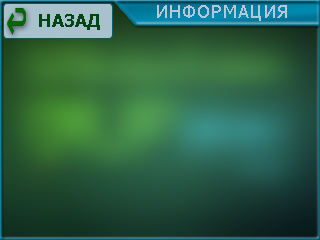
<style>
.page{position:relative;width:320px;height:240px}
.page>*{position:absolute;margin:0}
.t1{font:18px "Tahoma";letter-spacing:0.075em;color:#bac5d5}
.t2{font:18px "Tahoma-Bold";color:#004612}
</style>
<div class="page">
<p class="t1" style="left:157px;top:5px;width:130px;height:16px">ИНФОРМАЦИЯ</p>
<p class="t2" style="left:39px;top:14px;width:61px;height:16px">НАЗАД</p>
</div>
